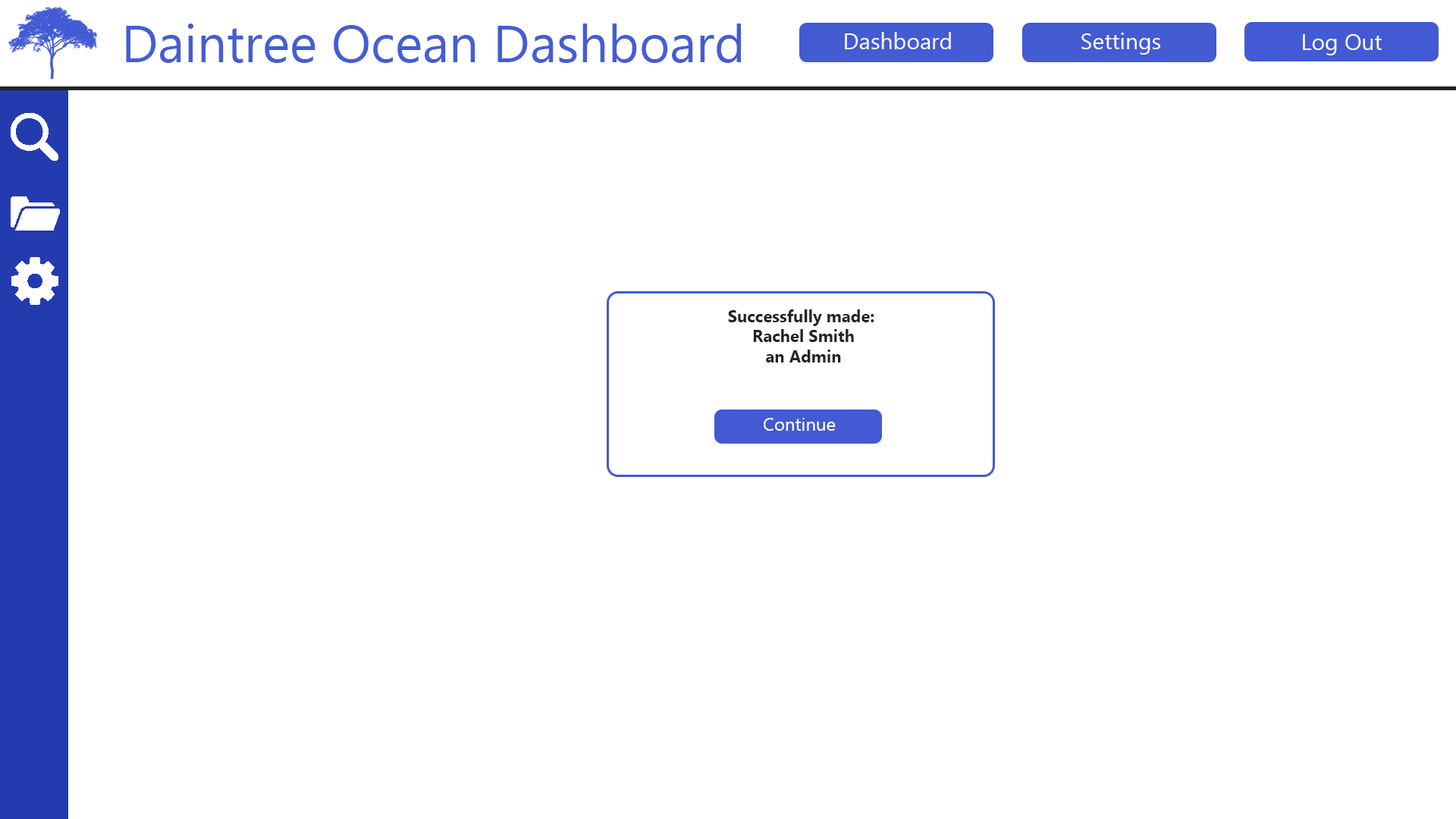
<style>
.page{position:relative;width:1456px;height:819px;background:#ffffff}
.page>*{position:absolute;margin:0}
.t1{font:52.3px "MyanmarText";color:#455dd4}
.t2{font:22.7px "MyanmarText";color:#ffffff}
.t3{font:16.7px "MyanmarText-Bold";color:#232323}
.t4{font:18.2px "MyanmarText";color:#ffffff}
</style>
<div class="page">
<p class="t1" style="left:126px;top:24px;width:615px;height:39px">Daintree Ocean Dashboard</p>
<p class="t2" style="left:845px;top:32px;width:106px;height:17px">Dashboard</p>
<p class="t2" style="left:1081px;top:33px;width:79px;height:22px">Settings</p>
<p class="t2" style="left:1303px;top:34px;width:79px;height:21px">Log Out</p>
<p class="t3" style="left:728px;top:309px;width:146px;height:53px;text-align:center">Successfully made: <br>Rachel Smith<br>an Admin</p>
<p class="t4" style="left:764px;top:418px;width:72px;height:13px">Continue</p>
</div>
